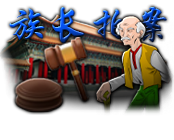
<style>
.page{position:relative;width:174px;height:140px;background:#ffffff}
.page>*{position:absolute;margin:0}
.t1{font:41.5px "STXingkai"}
</style>
<div class="page">
<p class="t1" style="left:9px;top:7px;width:158px;height:37px">族长拍案</p>
</div>
